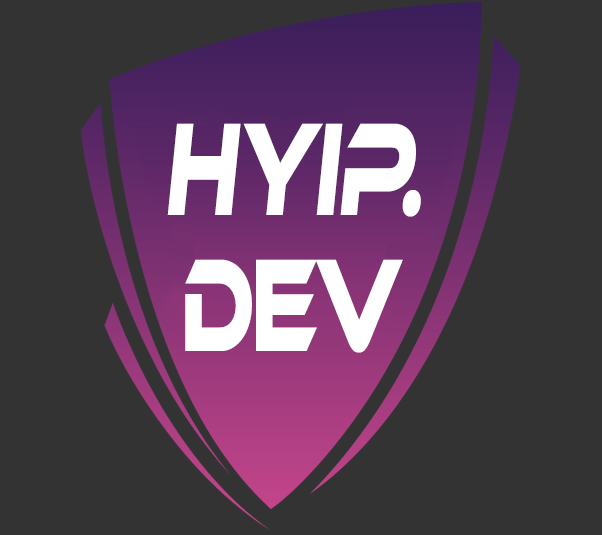
<style>
.page{position:relative;width:602px;height:535px;background:#333333}
.page>*{position:absolute;margin:0}
.t1{font:136.5px/136px "EthnocentricRg-Regular";letter-spacing:-0.03em;color:#ffffff;font-style:italic;scale:0.57 1}
.t2{font:136.5px/136px "EthnocentricRg-Regular";letter-spacing:-0.11em;color:#ffffff;font-style:italic;scale:0.57 1}
.t3{font:136.5px/136px "EthnocentricRg-Regular";letter-spacing:-0.05em;color:#ffffff;scale:0.57 1}
.t4{font:136.5px/136px "EthnocentricRg-Regular";letter-spacing:-0.03em;color:#ffffff;scale:0.57 1}
</style>
<div class="page">
<p class="t1" style="left:167px;top:123px;width:254px;height:230px;text-align:center">hyi<span class="t2">p</span>.<br><span class="t3">d</span><span class="t4">ev</span></p>
</div>
